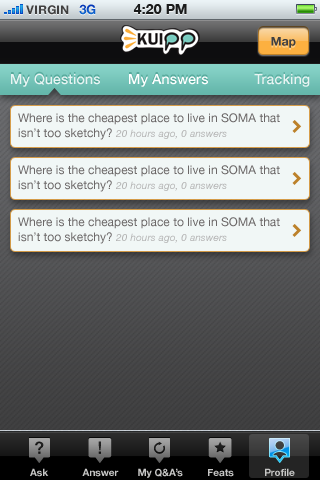
<style>
.page{position:relative;width:320px;height:480px;background:#f1f7f6}
.page>*{position:absolute;margin:0}
.t1{font:12px "HelveticaNeue-Bold";color:#404040;text-transform:uppercase}
.t2{font:13px "HelveticaNeue-Bold";color:#0c54c5;text-transform:uppercase}
.t3{font:14px "HelveticaNeue-Bold";color:#1a1b1b;text-transform:uppercase}
.t4{font:12px "HelveticaNeue-Bold";color:#404041}
.t5{font:14px "HelveticaNeue-Medium";letter-spacing:0.01em;color:#e9f4f3}
.t6{font:14px "HelveticaNeue-Medium";letter-spacing:0.01em;color:#ffffff}
.t7{font:12px/16px "HelveticaNeue";color:#6c6868}
.t8{font:12px/15px "HelveticaNeue";color:#6c6868}
.t9{font:10px/14px "HelveticaNeue-Italic";letter-spacing:0.01em;color:#b3b3b3}
.t10{font:10px "HelveticaNeue-Bold";color:#c6c6c5}
</style>
<div class="page">
<p class="t1" style="left:26px;top:5px;width:43px;height:10px">VIRGIN</p>
<p class="t2" style="left:79px;top:4px;width:17px;height:11px">3G</p>
<p class="t3" style="left:133px;top:4px;width:54px;height:10px">4:20 PM</p>
<p class="t4" style="left:271px;top:37px;width:25px;height:11px">Map</p>
<p class="t5" style="left:11px;top:73px;width:89px;height:14px">My Questions</p>
<p class="t6" style="left:129px;top:74px;width:79px;height:13px">My Answers</p>
<p class="t5" style="left:254px;top:74px;width:56px;height:13px">Tracking</p>
<p class="t7" style="left:18px;top:113px;width:262px;height:27px">Where is the cheapest place to live in <span class="t8">SOMA that <br>isn’t too sketchy? </span><span class="t9">20 hours ago, 0 answers</span></p>
<p class="t7" style="left:18px;top:165px;width:262px;height:27px">Where is the cheapest place to live in <span class="t8">SOMA that <br>isn’t too sketchy? </span><span class="t9">20 hours ago, 0 answers</span></p>
<p class="t7" style="left:18px;top:217px;width:262px;height:27px">Where is the cheapest place to live in <span class="t8">SOMA that <br>isn’t too sketchy? </span><span class="t9">20 hours ago, 0 answers</span></p>
<p class="t10" style="left:30px;top:468px;width:19px;height:9px">Ask</p>
<p class="t10" style="left:82px;top:468px;width:37px;height:9px">Answer</p>
<p class="t10" style="left:138px;top:468px;width:45px;height:10px">My Q&amp;A’s</p>
<p class="t10" style="left:208px;top:469px;width:26px;height:8px">Feats</p>
<p class="t10" style="left:265px;top:468px;width:30px;height:8px">Profile</p>
</div>
